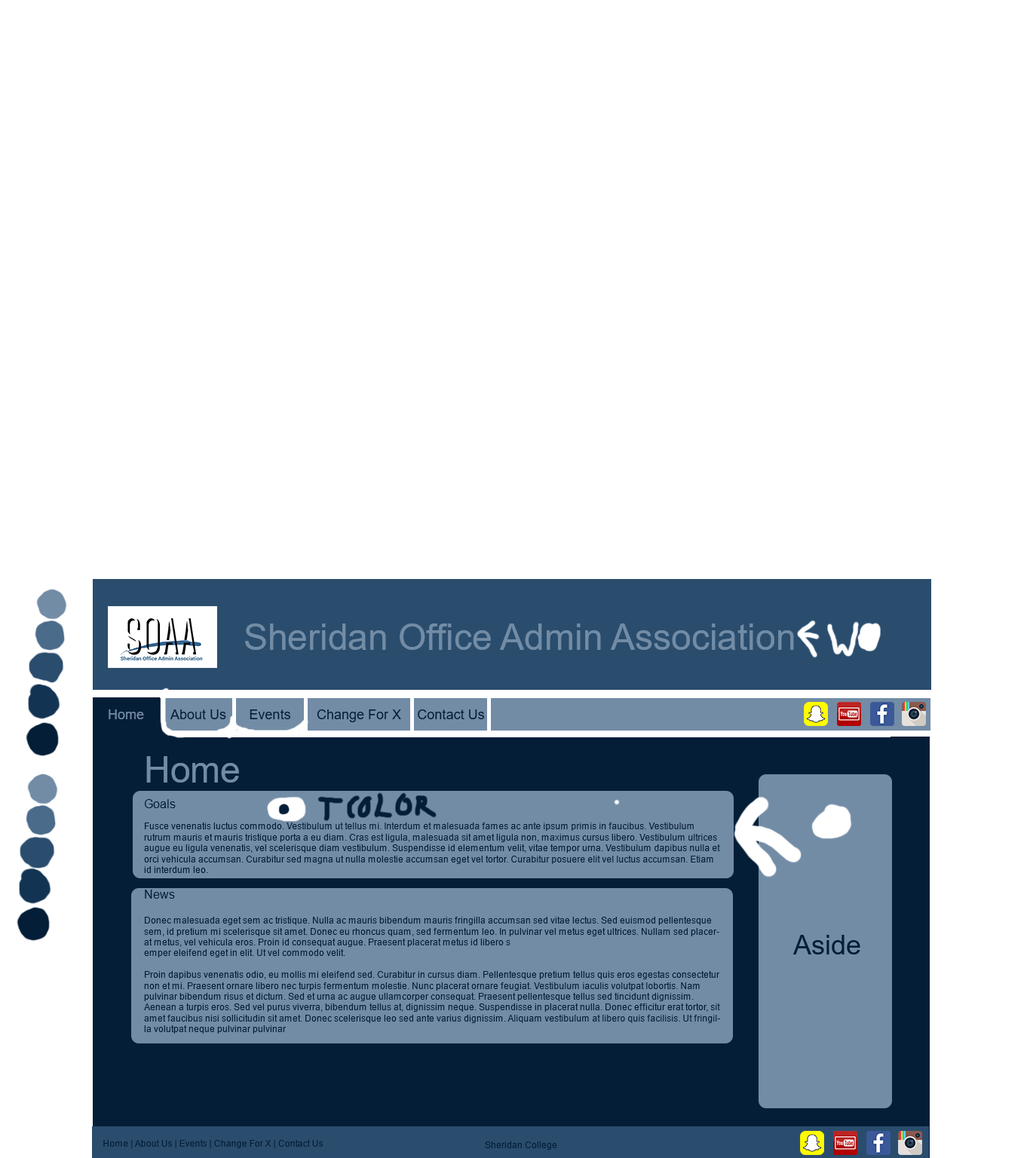
<style>
.page{position:relative;width:1030px;height:1158px;background:#ffffff}
.page>*{position:absolute;margin:0}
.t1{font:36.2px "ArialMT";color:#728ca6}
.t2{font:13.6px "ArialMT";color:#728ca6}
.t3{font:13.6px "ArialMT";color:#041e37}
.t4{font:9px "ArialMT";color:#041e37}
.t5{font:12.1px "ArialMT";color:#041e37}
.t6{font:27.1px "ArialMT";color:#041e37}
</style>
<div class="page">
<p class="t1" style="left:245px;top:623px;width:549px;height:27px">Sheridan Office Admin Association</p>
<p class="t2" style="left:109px;top:709px;width:35px;height:10px">Home</p>
<p class="t3" style="left:170px;top:709px;width:56px;height:10px">About Us</p>
<p class="t3" style="left:250px;top:709px;width:40px;height:10px">Events</p>
<p class="t3" style="left:317px;top:709px;width:84px;height:13px">Change For X</p>
<p class="t3" style="left:418px;top:709px;width:66px;height:10px">Contact Us</p>
<p class="t4" style="left:144px;top:756px;width:576px;height:278px"><span class="t1">Home<br><br></span><span class="t5">Goals<br></span><br>Fusce venenatis luctus commodo. Vestibulum ut tellus mi. Interdum et malesuada fames ac ante ipsum primis in faucibus. Vestibulum rutrum mauris et mauris tristique porta a eu diam. Cras est ligula, malesuada sit amet ligula non, maximus cursus libero. Vestibulum ultrices augue eu ligula venenatis, vel scelerisque diam vestibulum. Suspendisse id elementum velit, vitae tempor urna. Vestibulum dapibus nulla et orci vehicula accumsan. Curabitur sed magna ut nulla molestie accumsan eget vel tortor. Curabitur posuere elit vel luctus accumsan. Etiam id interdum leo.<br><br><span class="t5">News<br><br></span>Donec malesuada eget sem ac tristique. Nulla ac mauris bibendum mauris fringilla accumsan sed vitae lectus. Sed euismod pellentesque sem, id pretium mi scelerisque sit amet. Donec eu rhoncus quam, sed fermentum leo. In pulvinar vel metus eget ultrices. Nullam sed placerat metus, vel vehicula eros. Proin id consequat augue. Praesent placerat metus id libero s<br>emper eleifend eget in elit. Ut vel commodo velit.<br><br>Proin dapibus venenatis odio, eu mollis mi eleifend sed. Curabitur in cursus diam. Pellentesque pretium tellus quis eros egestas consectetur non et mi. Praesent ornare libero nec turpis fermentum molestie. Nunc placerat ornare feugiat. Vestibulum iaculis volutpat lobortis. Nam pulvinar bibendum risus et dictum. Sed et urna ac augue ullamcorper consequat. Praesent pellentesque tellus sed tincidunt dignissim. Aenean a turpis eros. Sed vel purus viverra, bibendum tellus at, dignissim neque. Suspendisse in placerat nulla. Donec efficitur erat tortor, sit amet faucibus nisi sollicitudin sit amet. Donec scelerisque leo sed ante varius dignissim. Aliquam vestibulum at libero quis facilisis. Ut fringilla volutpat neque pulvinar pulvinar</p>
<p class="t6" style="left:793px;top:935px;width:67px;height:19px">Aside</p>
<p class="t4" style="left:103px;top:1140px;width:220px;height:8px">Home | About Us | Events | Change For X | Contact Us</p>
<p class="t4" style="left:485px;top:1141px;width:72px;height:9px">Sheridan College</p>
</div>
